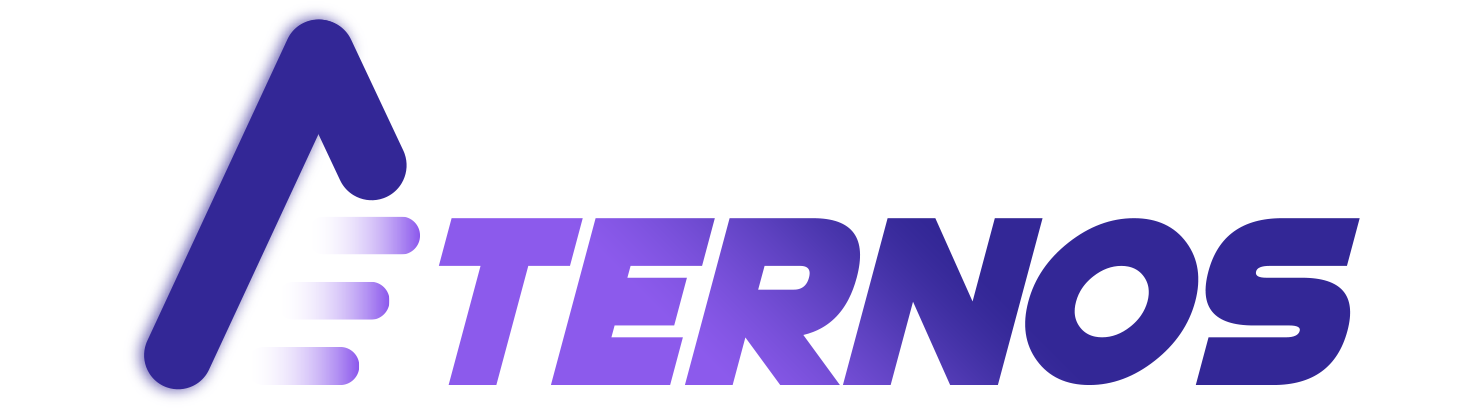
<style>
.page{position:relative;width:1482px;height:410px;background:#ffffff}
.page>*{position:absolute;margin:0}
.t1{font:244.3px "Quicksilver-Italic"}
</style>
<div class="page">
<p class="t1" style="left:438px;top:218px;width:922px;height:167px">TERNOS</p>
</div>
